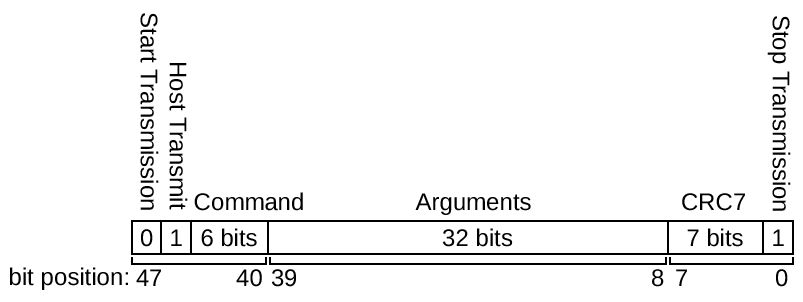
<style>
.page{position:relative;width:803px;height:302px;background:#ffffff}
.page>*{position:absolute;margin:0}
.t1{font:24px "LiberationSans";color:#000000}
</style>
<div class="page">
<p class="t1" style="left:140px;top:13px;width:19px;height:197px;rotate:90deg">Start Transmission</p>
<p class="t1" style="left:767px;top:16px;width:24px;height:195px;rotate:90deg">Stop Transmission</p>
<p class="t1" style="left:169px;top:63px;width:19px;height:147px;rotate:90deg">Host Transmit</p>
<p class="t1" style="left:194px;top:192px;width:109px;height:19px">Command</p>
<p class="t1" style="left:415px;top:193px;width:116px;height:22px">Arguments</p>
<p class="t1" style="left:682px;top:193px;width:63px;height:18px">CRC7</p>
<p class="t1" style="left:201px;top:228px;width:56px;height:19px">6 bits</p>
<p class="t1" style="left:443px;top:228px;width:70px;height:19px">32 bits</p>
<p class="t1" style="left:687px;top:228px;width:56px;height:19px">7 bits</p>
<p class="t1" style="left:10px;top:267px;width:118px;height:23px">bit position:</p>
<p class="t1" style="left:136px;top:269px;width:126px;height:18px">47           40</p>
<p class="t1" style="left:272px;top:269px;width:392px;height:18px">39                                                     8</p>
<p class="t1" style="left:676px;top:269px;width:112px;height:18px">7             0</p>
</div>
